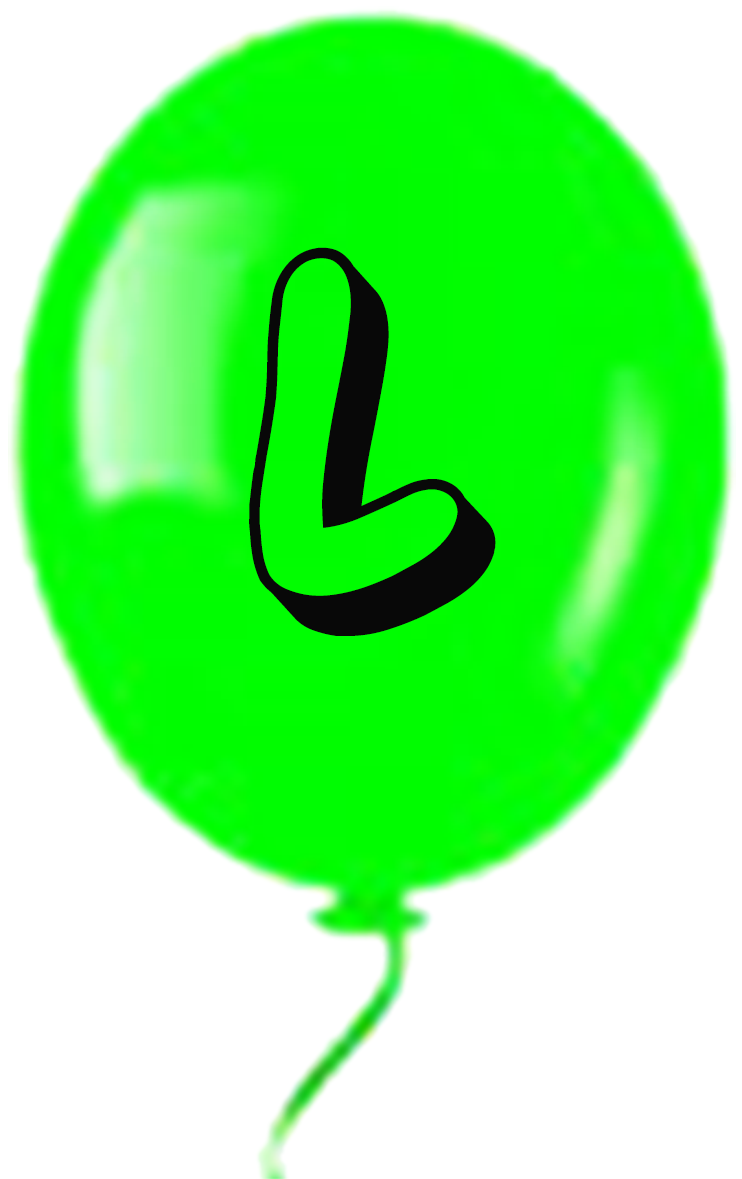
<style>
.page{position:relative;width:742px;height:1179px;background:#ffffff}
.page>*{position:absolute;margin:0}
.t1{font:500px "ActionManShaded";color:#080808}
</style>
<div class="page">
<p class="t1" style="left:249px;top:247px;width:247px;height:389px">l</p>
</div>
